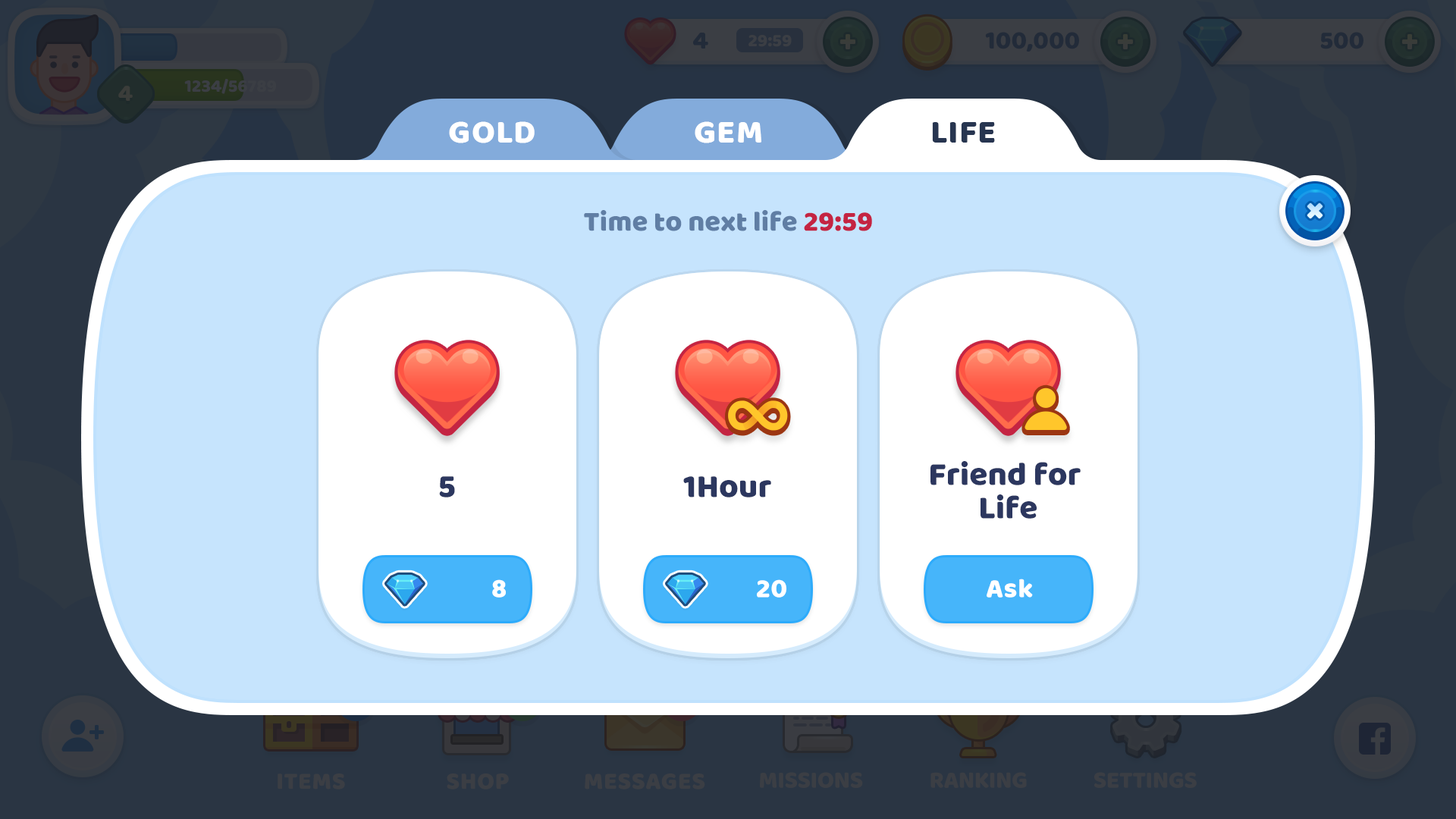
<style>
.page{position:relative;width:1456px;height:819px;background:#c6e4fd}
.page>*{position:absolute;margin:0}
.t1{font:33.6px "BalooBhaijaan-Regular";color:#ffffff;text-transform:uppercase}
.t2{font:33.6px "BalooBhaijaan-Regular";color:#273550;text-transform:uppercase}
.t3{font:28.8px "BalooBhaijaan-Regular";color:#607ea4}
.t4{font:28.8px "BalooBhaijaan-Regular";color:#c42442}
.t5{font:33.4px/33.4px "BalooBhaijaan-Regular";color:#2c375f}
.t6{font:33.4px "BalooBhaijaan-Regular";color:#2c375f}
.t7{font:27.3px "BalooBhaijaan-Regular";color:#ffffff}
</style>
<div class="page">
<p class="t1" style="left:449px;top:121px;width:86px;height:22px">Gold</p>
<p class="t1" style="left:695px;top:121px;width:66px;height:22px">Gem</p>
<p class="t2" style="left:932px;top:122px;width:63px;height:21px">life</p>
<p class="t3" style="left:584px;top:210px;width:288px;height:21px">Time to next life <span class="t4">29:59</span></p>
<p class="t5" style="left:930px;top:461px;width:151px;height:58px;text-align:center">Friend for <br>Life</p>
<p class="t6" style="left:439px;top:476px;width:16px;height:21px">5</p>
<p class="t6" style="left:683px;top:476px;width:88px;height:21px">1Hour</p>
<p class="t7" style="left:492px;top:579px;width:14px;height:19px">8</p>
<p class="t7" style="left:757px;top:579px;width:29px;height:19px">20</p>
<p class="t7" style="left:987px;top:579px;width:46px;height:19px">Ask</p>
</div>
